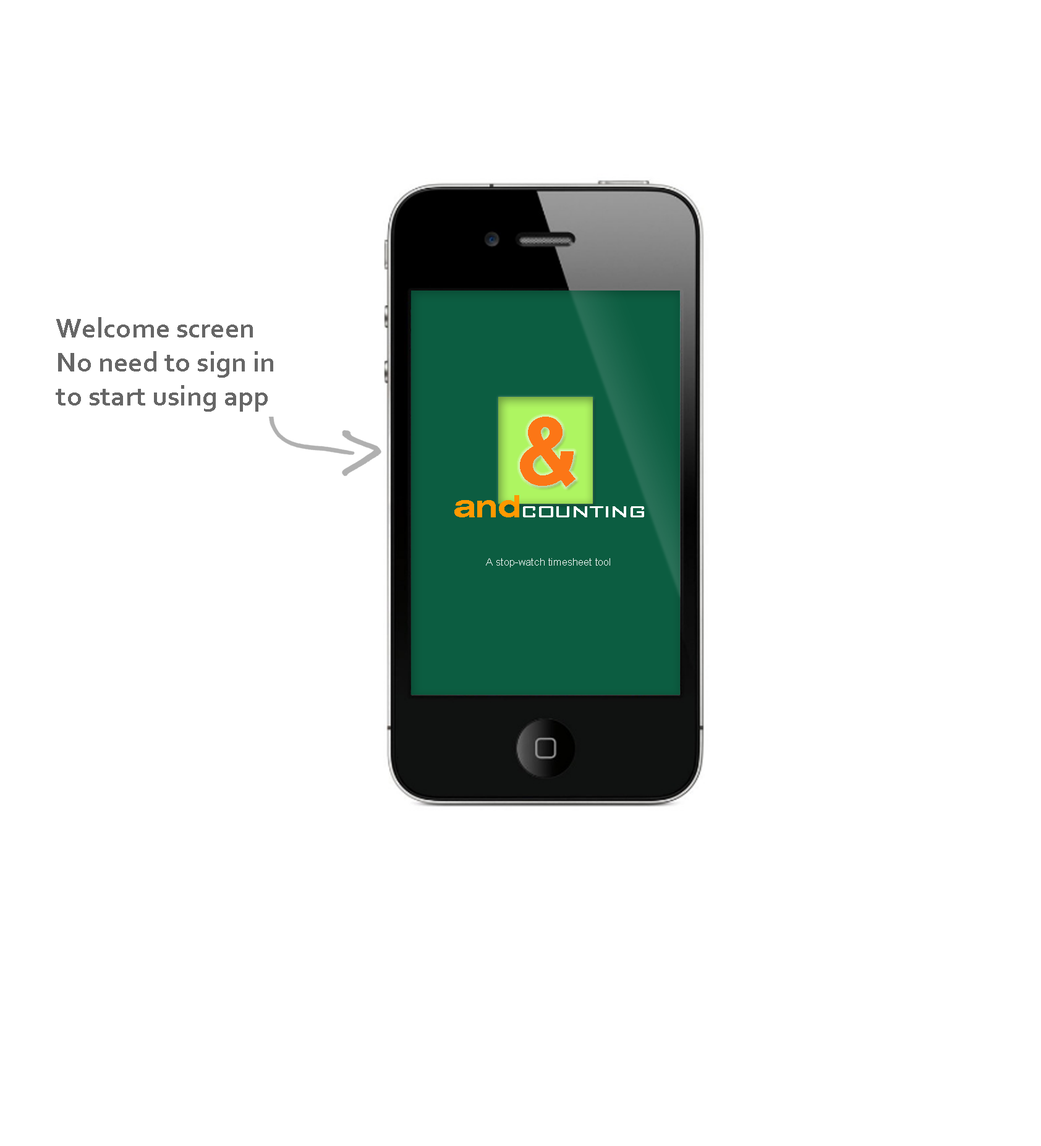
<style>
.page{position:relative;width:1041px;height:1146px;background:#ffffff}
.page>*{position:absolute;margin:0}
.t1{font:28.3px "Corbel-Bold";color:#666666}
.t2{font:92.7px "Mangal-Bold";color:#fc7616}
.t3{font:25.8px "BankGothicBT-Medium";letter-spacing:-0.025em;color:#ffffff}
.t4{font:30.9px "Swiss721BT-BoldExtended";letter-spacing:-0.025em;color:#ff9900}
.t5{font:10.3px "ArialMT";letter-spacing:0.01em;color:#ffffff}
</style>
<div class="page">
<p class="t1" style="left:56px;top:317px;width:217px;height:95px">Welcome screen<br>No need to sign in <br>to start using app</p>
<p class="t2" style="left:520px;top:417px;width:55px;height:70px">&amp;</p>
<p class="t3" style="left:454px;top:495px;width:190px;height:22px"><span class="t4">and</span>counting</p>
<p class="t5" style="left:486px;top:558px;width:124px;height:9px">A stop-watch timesheet tool</p>
</div>
